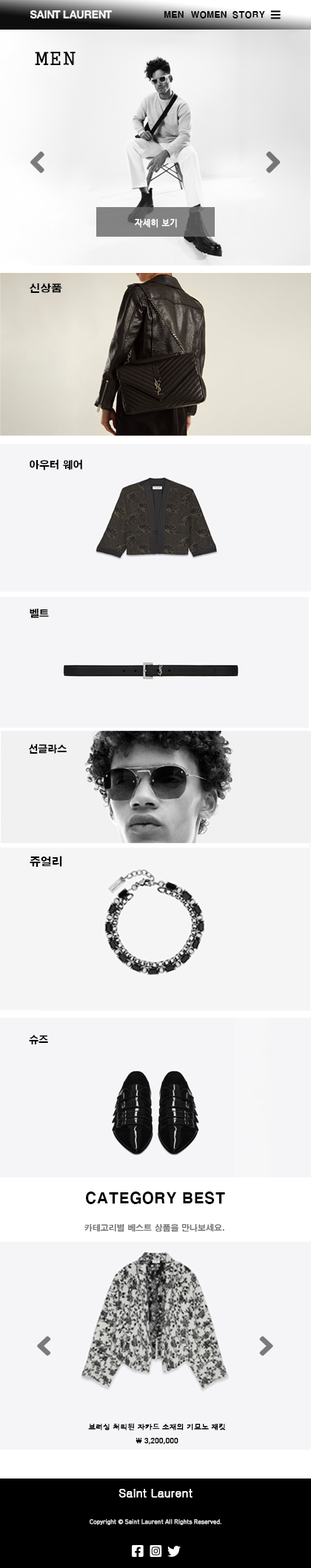
<style>
.page{position:relative;width:311px;height:1568px;background:#f5f5f7}
.page>*{position:absolute;margin:0}
.t1{font:8.6px "H2gtrE";color:#000000}
.t2{font:18.5px "H2gsrB";color:#000000}
.t3{font:8.1px "HCRDotum";color:#fefefe;font-weight:bold}
.t4{font:9.6px "H2gtrE";color:#000000;scale:1.13 1}
.t5{font:9.9px "H2gtrE";color:#000000}
.t6{font:9.8px "H2gtrE";color:#000000}
.t7{font:9.6px "H2gtrE";color:#000000}
.t8{font:11px "H2gtrE";color:#000000}
.t9{font:14.8px "H2gtrE";color:#000000}
.t10{font:17.8px "H2gtrE";color:#37baac}
.t11{font:8.1px/14.8px "H2gtrE";color:#737373}
.t12{font:6.9px/13.9px "HCRDotum";color:#000000;font-weight:bold;scale:1.07 1}
.t13{font:11.4px "Gulim";color:#ffffff;font-weight:bold}
.t14{font:5.7px "HCRDotum";color:#d4d4d4;font-weight:bold}
</style>
<div class="page">
<p class="t1" style="left:163px;top:10px;width:20px;height:8px">MEN</p>
<p class="t1" style="left:191px;top:10px;width:35px;height:8px">WOMEN</p>
<p class="t1" style="left:232px;top:10px;width:33px;height:8px">STORY</p>
<p class="t2" style="left:35px;top:52px;width:40px;height:13px">MEN</p>
<p class="t3" style="left:135px;top:219px;width:42px;height:9px">자세히 보기</p>
<p class="t4" style="left:30px;top:283px;width:32px;height:10px">신상품</p>
<p class="t5" style="left:30px;top:459px;width:52px;height:11px">아우터 웨어</p>
<p class="t6" style="left:30px;top:608px;width:19px;height:10px">벨트</p>
<p class="t7" style="left:29px;top:744px;width:38px;height:10px">선글라스</p>
<p class="t8" style="left:30px;top:856px;width:32px;height:11px">쥬얼리</p>
<p class="t7" style="left:29px;top:1035px;width:19px;height:9px">슈즈</p>
<p class="t9" style="left:86px;top:1192px;width:139px;height:12px"><span class="t10"><br></span>CATEGORY BEST</p>
<p class="t11" style="left:84px;top:1223px;width:140px;height:9px;text-align:center">카테고리별 베스트 상품을 만나보세요.<br><br>카테고리별 베스트 상품을 만나보세요.</p>
<p class="t12" style="left:88px;top:1423px;width:137px;height:21px;text-align:center">브러싱 처리된 자카드 소재의 기모노 재킷 <br>₩ 3,200,000</p>
<p class="t13" style="left:119px;top:1489px;width:73px;height:9px">Saint Laurent</p>
<p class="t14" style="left:89px;top:1519px;width:132px;height:6px">Copyright © Saint Laurent All Rights Reserved.</p>
</div>
